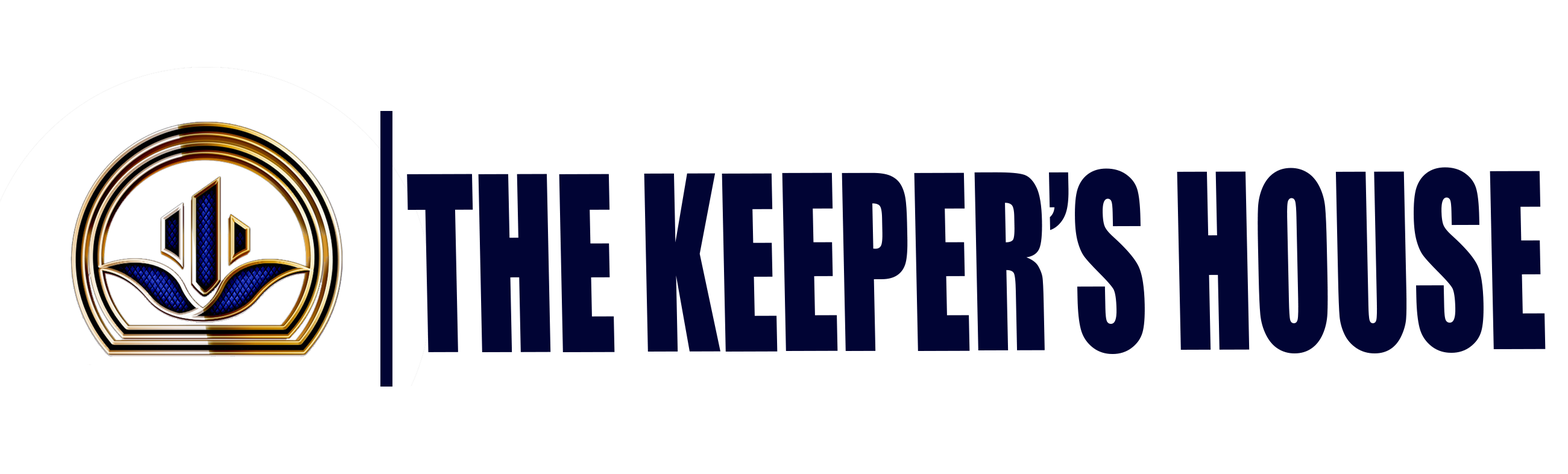
<style>
.page{position:relative;width:1568px;height:474px;background:#ffffff}
.page>*{position:absolute;margin:0}
.t1{font:225.1px "Impact";color:#010434;scale:0.64 1}
</style>
<div class="page">
<p class="t1" style="left:407px;top:167px;width:1139px;height:187px">THE KEEPER’S HOUSE</p>
</div>
